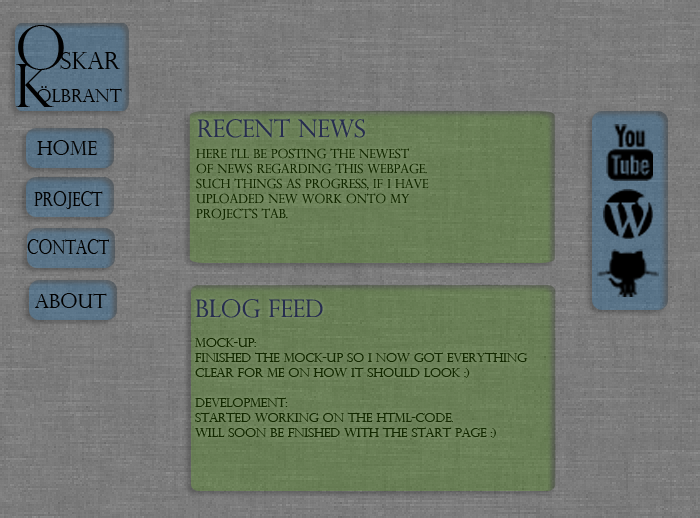
<style>
.page{position:relative;width:700px;height:518px}
.page>*{position:absolute;margin:0}
.t1{font:60px "PerpetuaTitlingMT-Light";color:#000000}
.t2{font:24px "PerpetuaTitlingMT-Light";color:#000000}
.t3{font:18px "PerpetuaTitlingMT-Light";color:#000000}
.t4{font:24px "PerpetuaTitlingMT-Light";color:#272d50}
.t5{font:20px "PerpetuaTitlingMT-Light";color:#000000}
.t6{font:12.5px "PerpetuaTitlingMT-Light";color:#132800}
.t7{font:20px "PerpetuaTitlingMT-Light";color:#000000;scale:0.79 1}
.t8{font:20px "PerpetuaTitlingMT-Light";color:#000000;scale:0.8 1}
</style>
<div class="page">
<p class="t1" style="left:18px;top:25px;width:46px;height:45px">O</p>
<p class="t2" style="left:60px;top:52px;width:60px;height:17px">skar</p>
<p class="t3" style="left:36px;top:86px;width:86px;height:16px">ölbrant</p>
<p class="t4" style="left:197px;top:118px;width:168px;height:20px">Recent News</p>
<p class="t5" style="left:37px;top:140px;width:60px;height:15px">Home</p>
<p class="t6" style="left:196px;top:148px;width:233px;height:72px">Here i’ll be posting the newest<br>of news regarding this webpage.<br>Such things as progress, if i have<br>uploaded new work onto my<br>project’s tab.</p>
<p class="t7" style="left:34px;top:191px;width:69px;height:18px">Project</p>
<p class="t8" style="left:27px;top:239px;width:82px;height:15px">Contact</p>
<p class="t5" style="left:35px;top:293px;width:72px;height:15px">About</p>
<p class="t4" style="left:195px;top:299px;width:128px;height:19px">Blog Feed</p>
<p class="t6" style="left:195px;top:338px;width:333px;height:100px">Mock-up:<br>Finished the mock-up so i now got everything<br>clear for me on how it should look :)<br><br>Development:<br>Started working on the HTML-code. <br>Will soon be fnished with the start page :)</p>
</div>
